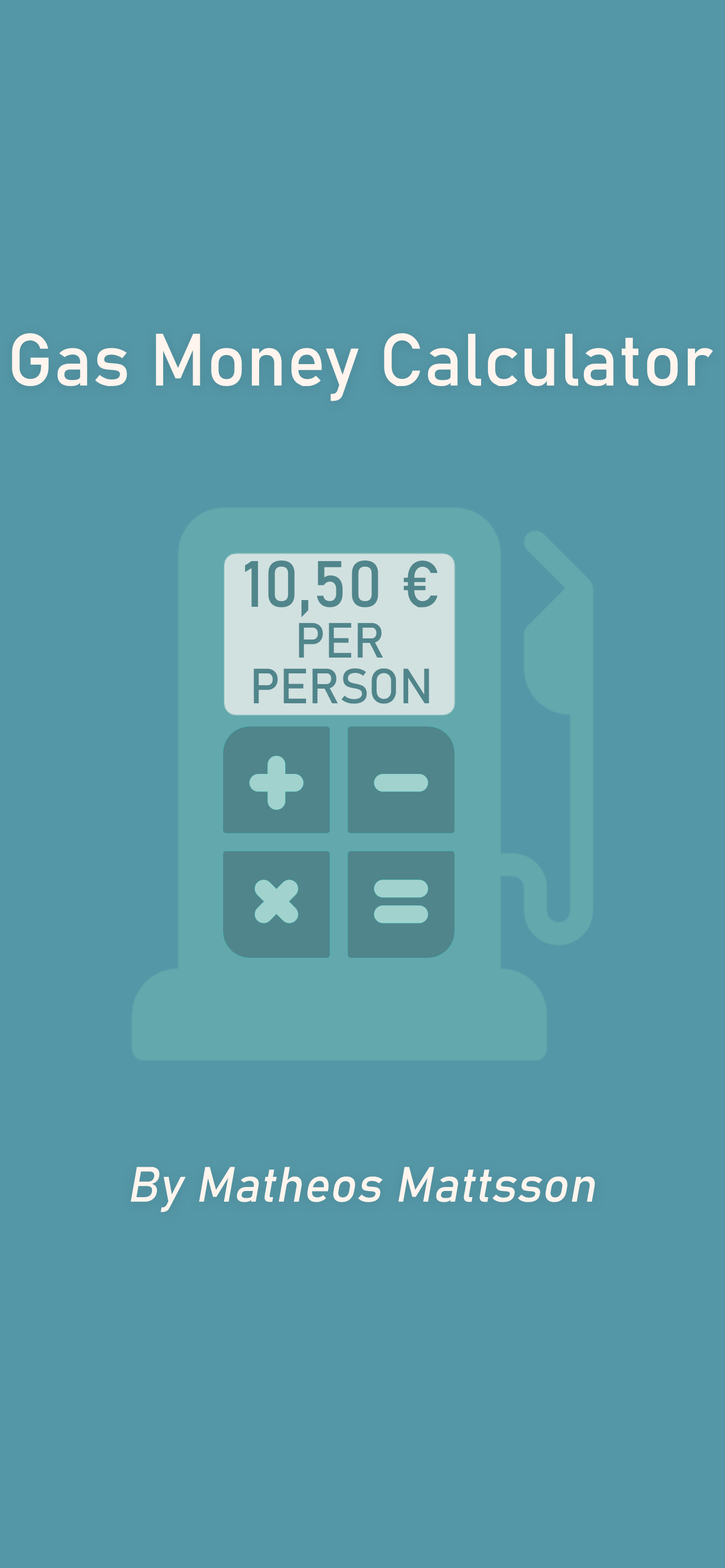
<style>
.page{position:relative;width:725px;height:1568px;background:#5497a7}
.page>*{position:absolute;margin:0}
.t1{font:124.7px "Bahnschrift";color:#fff5ee}
.t2{font:84px "Bahnschrift";color:#fff5ee;font-style:italic}
</style>
<div class="page">
<p class="t1" style="left:12px;top:333px;width:701px;height:68px">Gas Money Calculator</p>
<p class="t2" style="left:130px;top:1167px;width:465px;height:45px">By Matheos Mattsson</p>
</div>
